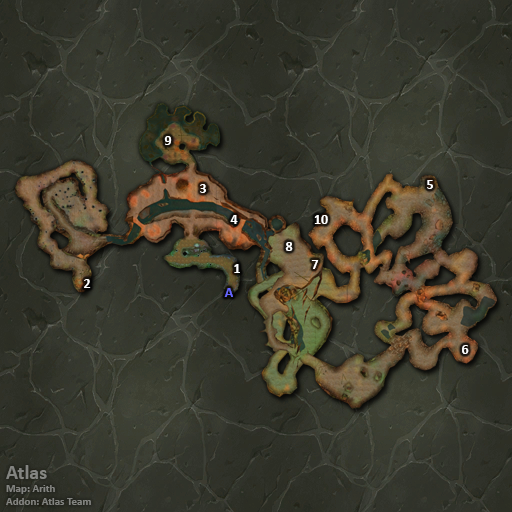
<style>
.page{position:relative;width:512px;height:512px}
.page>*{position:absolute;margin:0}
.t1{font:14px "Calibri-Bold";color:#ffffff}
.t2{font:14px "Calibri-Bold";color:#6666ff}
.t3{font:11px "Calibri-Bold";color:#838481}
.t4{font:20px "Calibri-Bold";color:#838481}
</style>
<div class="page">
<p class="t1" style="left:164px;top:136px;width:8px;height:9px">9</p>
<p class="t1" style="left:200px;top:184px;width:6px;height:9px">3</p>
<p class="t1" style="left:427px;top:180px;width:6px;height:9px">5</p>
<p class="t1" style="left:230px;top:215px;width:8px;height:9px">4</p>
<p class="t1" style="left:314px;top:215px;width:14px;height:9px">10</p>
<p class="t1" style="left:285px;top:242px;width:8px;height:9px">8</p>
<p class="t1" style="left:234px;top:264px;width:6px;height:9px">1</p>
<p class="t1" style="left:311px;top:260px;width:8px;height:9px">7</p>
<p class="t1" style="left:84px;top:279px;width:7px;height:9px">2</p>
<p class="t2" style="left:224px;top:288px;width:9px;height:9px">A</p>
<p class="t1" style="left:462px;top:345px;width:7px;height:9px">6</p>
<p class="t3" style="left:6px;top:465px;width:85px;height:40px"><span class="t4">Atlas<br></span>Map: Arith<br>Addon: Atlas Team</p>
</div>
